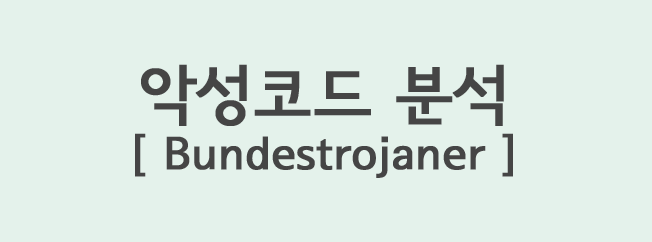
<style>
.page{position:relative;width:652px;height:242px;background:#e4f2eb}
.page>*{position:absolute;margin:0}
.t1{font:45px "SeoulNamsanB";color:#454545;font-weight:bold}
.t2{font:64px "SeoulNamsanB";color:#454545;font-weight:bold}
</style>
<div class="page">
<p class="t1" style="left:135px;top:64px;width:378px;height:114px;text-align:center"><span class="t2">악성코드 분석<br></span>[ Bundestrojaner ]</p>
</div>
